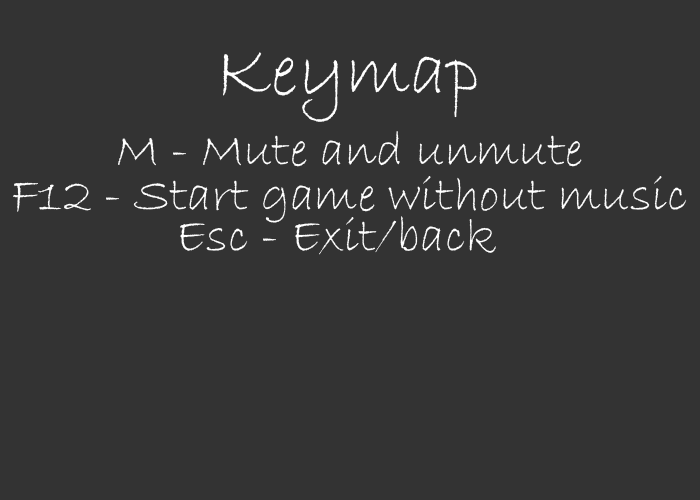
<style>
.page{position:relative;width:700px;height:500px;background:#333333}
.page>*{position:absolute;margin:0}
.t1{font:75px "BradleyHandITC";color:#ffffff}
.t2{font:50px "BradleyHandITC";color:#ffffff}
.t3{font:12px "BradleyHandITC";color:#ffffff}
</style>
<div class="page">
<p class="t1" style="left:223px;top:52px;width:254px;height:70px">Keymap</p>
<p class="t2" style="left:118px;top:131px;width:464px;height:36px">M - Mute and unmute</p>
<p class="t3" style="left:13px;top:176px;width:674px;height:47px">F12 - Start game without music</p>
<p class="t3" style="left:180px;top:216px;width:316px;height:39px">Esc - Exit/back</p>
</div>
